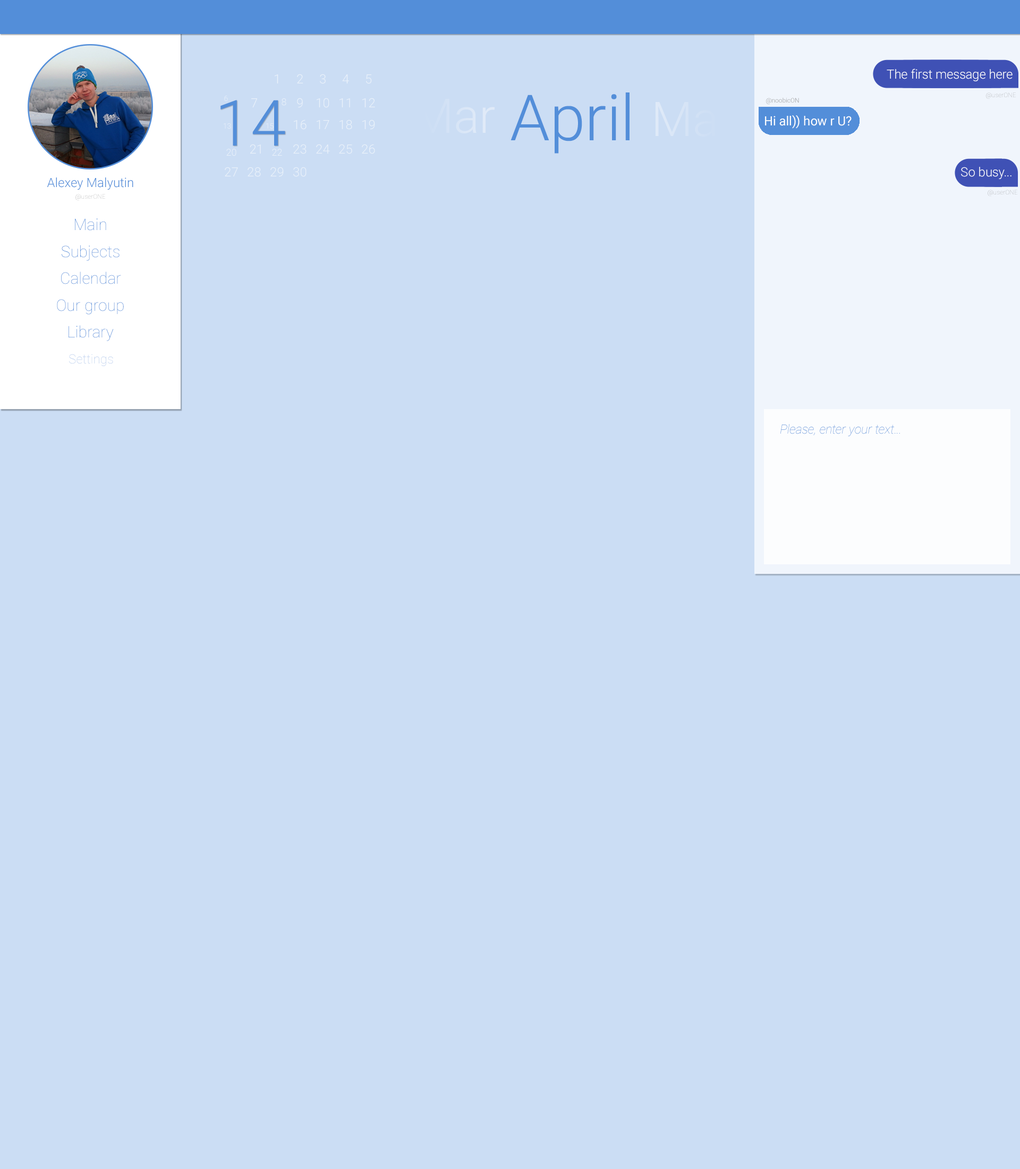
<style>
.page{position:relative;width:1020px;height:1169px;background:#cbddf4}
.page>*{position:absolute;margin:0}
.t1{font:12.8px "Roboto-Light";color:#fcfdfe}
.t2{font:12.8px "Roboto-Light";color:#ffffff}
.t3{font:63.8px "Roboto-Light";color:#538ed9}
.t4{font:7.4px "Roboto-Light"}
.t5{font:9.6px "Roboto-Light";color:#fcfdfe}
.t6{font:47.8px "Roboto-Light";color:#d3e2f6}
.t7{font:6.4px "Roboto-Light";color:#959696}
.t8{font:6.4px "Roboto-Thin"}
.t9{font:47.8px "Roboto-Light";color:#d5e3f6}
.t10{font:7.4px "Roboto-Light";color:#fcfdfe}
.t11{font:12.8px "Roboto-Regular";color:#fcfdfe}
.t12{font:12.8px "Roboto-Light";color:#538ed9}
.t13{font:15.9px "Roboto-Thin";color:#538ed9}
.t14{font:12.8px "Roboto-Thin"}
.t15{font:12.8px "Roboto-ThinItalic";color:#538ed9}
</style>
<div class="page">
<p class="t1" style="left:275px;top:74px;width:3px;height:9px;opacity:0.6">1</p>
<p class="t1" style="left:297px;top:74px;width:6px;height:9px;opacity:0.6">2</p>
<p class="t1" style="left:320px;top:74px;width:6px;height:10px;opacity:0.6">3</p>
<p class="t1" style="left:342px;top:74px;width:7px;height:9px;opacity:0.6">4</p>
<p class="t1" style="left:366px;top:74px;width:6px;height:10px;opacity:0.6">5</p>
<p class="t2" style="left:887px;top:69px;width:126px;height:12px">The first message here</p>
<p class="t3" style="left:220px;top:100px;width:65px;height:46px">14</p>
<p class="t4" style="left:224px;top:96px;width:4px;height:5px">6</p>
<p class="t1" style="left:251px;top:98px;width:6px;height:9px;opacity:0.6">7</p>
<p class="t5" style="left:282px;top:98px;width:4px;height:8px;opacity:0.6">8</p>
<p class="t1" style="left:297px;top:98px;width:6px;height:10px;opacity:0.6">9</p>
<p class="t1" style="left:317px;top:98px;width:12px;height:10px;opacity:0.6">10</p>
<p class="t1" style="left:340px;top:98px;width:10px;height:9px;opacity:0.6">11</p>
<p class="t1" style="left:362px;top:98px;width:13px;height:9px;opacity:0.6">12</p>
<p class="t6" style="left:417px;top:99px;width:78px;height:34px">Mar</p>
<p class="t3" style="left:511px;top:92px;width:119px;height:62px">April</p>
<p class="t7" style="left:766px;top:98px;width:33px;height:6px">@noobicON</p>
<p class="t8" style="left:986px;top:92px;width:30px;height:7px">@userONE</p>
<p class="t9" style="left:656px;top:102px;width:85px;height:45px">May</p>
<p class="t4" style="left:224px;top:123px;width:7px;height:6px">13</p>
<p class="t10" style="left:266px;top:123px;width:8px;height:6px;opacity:0.6">15</p>
<p class="t1" style="left:294px;top:120px;width:13px;height:10px;opacity:0.6">16</p>
<p class="t1" style="left:317px;top:120px;width:12px;height:9px;opacity:0.6">17</p>
<p class="t1" style="left:340px;top:120px;width:12px;height:10px;opacity:0.6">18</p>
<p class="t1" style="left:362px;top:120px;width:13px;height:10px;opacity:0.6">19</p>
<p class="t11" style="left:765px;top:115px;width:87px;height:14px">Hi all)) how r U?</p>
<p class="t5" style="left:226px;top:149px;width:10px;height:7px;opacity:0.6">20</p>
<p class="t1" style="left:250px;top:144px;width:11px;height:10px;opacity:0.6">21</p>
<p class="t5" style="left:272px;top:149px;width:10px;height:7px;opacity:0.6">22</p>
<p class="t1" style="left:293px;top:144px;width:14px;height:10px;opacity:0.6">23</p>
<p class="t1" style="left:316px;top:144px;width:14px;height:10px;opacity:0.6">24</p>
<p class="t1" style="left:339px;top:144px;width:13px;height:10px;opacity:0.6">25</p>
<p class="t1" style="left:362px;top:144px;width:13px;height:10px;opacity:0.6">26</p>
<p class="t1" style="left:225px;top:167px;width:13px;height:9px;opacity:0.6">27</p>
<p class="t1" style="left:248px;top:167px;width:13px;height:10px;opacity:0.6">28</p>
<p class="t1" style="left:270px;top:167px;width:14px;height:10px;opacity:0.6">29</p>
<p class="t1" style="left:293px;top:167px;width:14px;height:10px;opacity:0.6">30</p>
<p class="t1" style="left:961px;top:167px;width:51px;height:12px">So busy...</p>
<p class="t12" style="left:47px;top:177px;width:86px;height:13px">Alexey Malyutin</p>
<p class="t8" style="left:75px;top:194px;width:30px;height:6px">@userONE</p>
<p class="t8" style="left:988px;top:190px;width:29px;height:6px">@userONE</p>
<p class="t13" style="left:75px;top:218px;width:31px;height:13px">Main</p>
<p class="t13" style="left:62px;top:245px;width:58px;height:16px">Subjects</p>
<p class="t13" style="left:61px;top:272px;width:60px;height:12px">Calendar</p>
<p class="t13" style="left:57px;top:299px;width:67px;height:16px">Our group</p>
<p class="t13" style="left:69px;top:325px;width:45px;height:16px">Library</p>
<p class="t14" style="left:69px;top:354px;width:44px;height:12px">Settings</p>
<p class="t15" style="left:781px;top:424px;width:119px;height:12px">Please, enter your text...</p>
</div>
